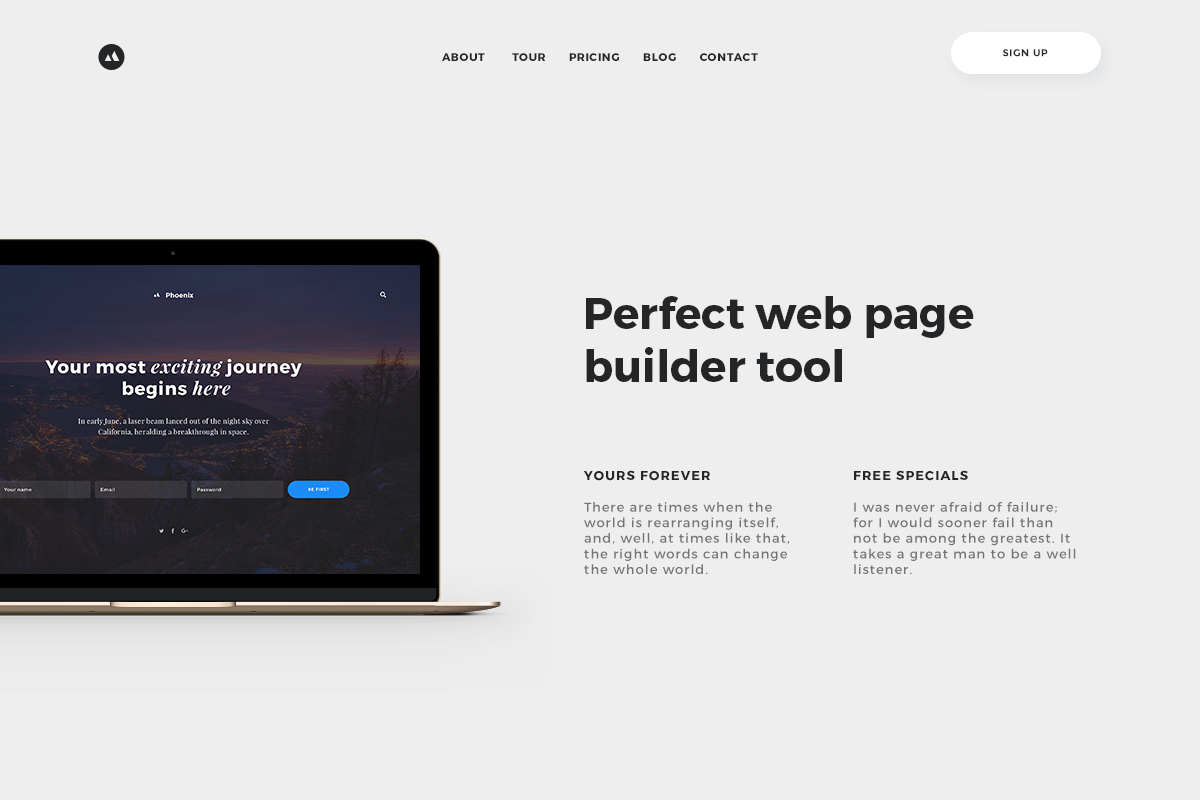
<style>
.page{position:relative;width:1200px;height:800px;background:#eeeeee}
.page>*{position:absolute;margin:0}
.t1{font:11px "Montserrat-Bold";letter-spacing:0.07em;color:#242526;text-transform:uppercase}
.t2{font:10px "Montserrat-Bold";letter-spacing:0.05em;color:#242526;text-transform:uppercase}
.t3{font:44px "Montserrat-Bold";color:#242526}
.t4{font:13px "Montserrat-Bold";letter-spacing:0.08em;color:#242526;text-transform:uppercase}
.t5{font:13px "Montserrat-Regular";letter-spacing:0.08em;color:#747474}
</style>
<div class="page">
<p class="t1" style="left:442px;top:53px;width:316px;height:8px">About       Tour      Pricing      Blog      Contact</p>
<p class="t2" style="left:1003px;top:49px;width:45px;height:8px">sign up</p>
<p class="t3" style="left:586px;top:296px;width:388px;height:86px">Perfect web page<br>builder tool</p>
<p class="t4" style="left:584px;top:470px;width:126px;height:11px">Yours forever</p>
<p class="t4" style="left:854px;top:470px;width:114px;height:11px">free specials</p>
<p class="t5" style="left:584px;top:502px;width:206px;height:73px">There are times when the world is rearranging itself, and, well, at times like that, the right words can change the whole world.</p>
<p class="t5" style="left:853px;top:502px;width:223px;height:73px">I was never afraid of failure; for I would sooner fail than not be among the greatest. It takes a great man to be a well listener.</p>
</div>
